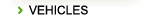
<style>
.page{position:relative;width:149px;height:22px;background:#ffffff}
.page>*{position:absolute;margin:0}
.t1{font:12px "ArialMT";color:#000000}
</style>
<div class="page">
<p class="t1" style="left:29px;top:5px;width:59px;height:10px">VEHICLES</p>
</div>
